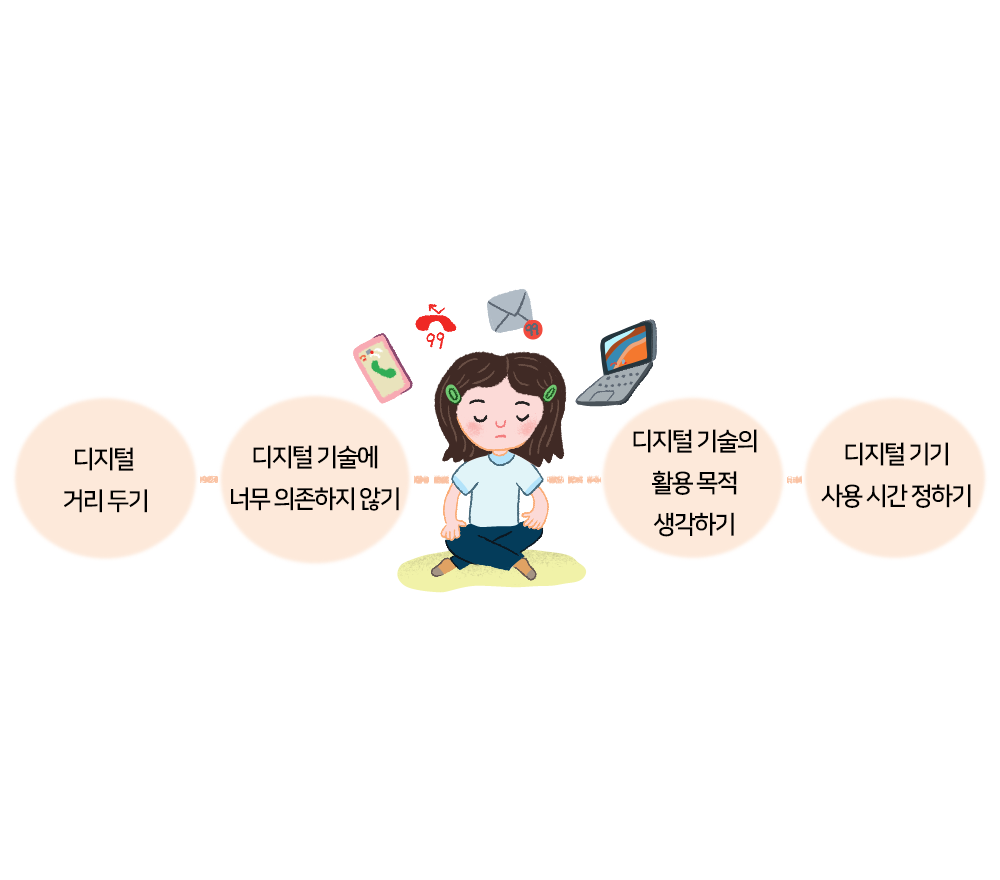
<style>
.page{position:relative;width:1000px;height:880px;background:#ffffff}
.page>*{position:absolute;margin:0}
.t1{font:25px/41.7px "NanumSquareB";letter-spacing:-0.08em;color:#000000}
</style>
<div class="page">
<p class="t1" style="left:633px;top:429px;width:124px;height:108px;text-align:center">디지털 기술의<br>활용 목적<br>생각하기</p>
<p class="t1" style="left:64px;top:447px;width:83px;height:66px;text-align:center">디지털 <br>거리 두기</p>
<p class="t1" style="left:231px;top:445px;width:168px;height:66px;text-align:center">디지털 기술에<br>너무 의존하지 않기</p>
<p class="t1" style="left:821px;top:442px;width:150px;height:66px;text-align:center">디지털 기기<br>사용 시간 정하기</p>
</div>
